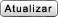
<style>
.page{position:relative;width:58px;height:17px}
.page>*{position:absolute;margin:0}
.t1{font:10px "ArialMT";letter-spacing:0.1em;color:#040404}
</style>
<div class="page">
<p class="t1" style="left:4px;top:4px;width:48px;height:9px">Atualizar</p>
</div>
